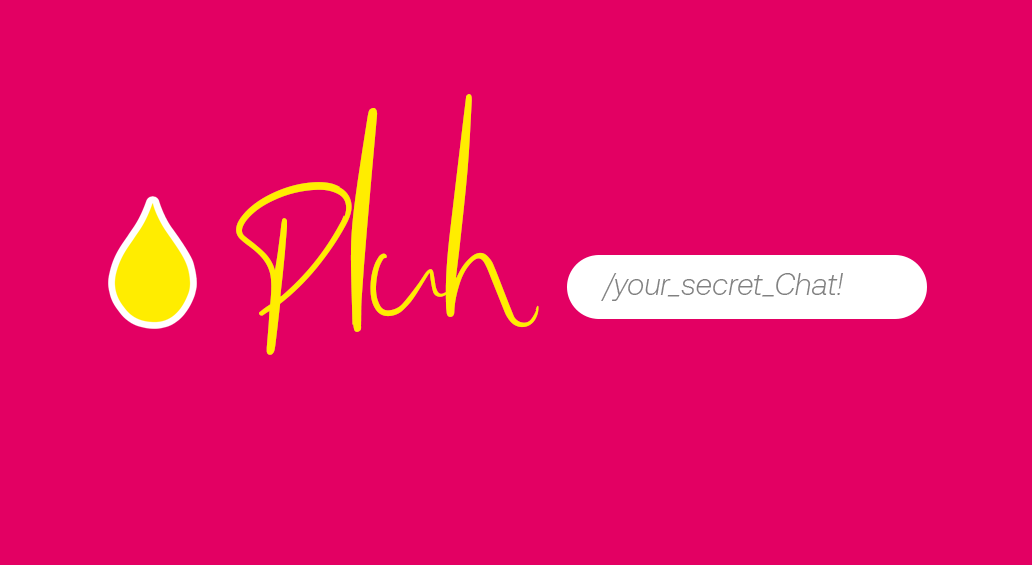
<style>
.page{position:relative;width:1032px;height:565px;background:#e30063}
.page>*{position:absolute;margin:0}
.t1{font:250px "Pommel-Regular";color:#ffed00}
.t2{font:30px "Aeonik-LightItalic";color:#818181}
</style>
<div class="page">
<p class="t1" style="left:236px;top:94px;width:303px;height:261px">Pluh</p>
<p class="t2" style="left:601px;top:273px;width:242px;height:28px">/your_secret_Chat!</p>
</div>
